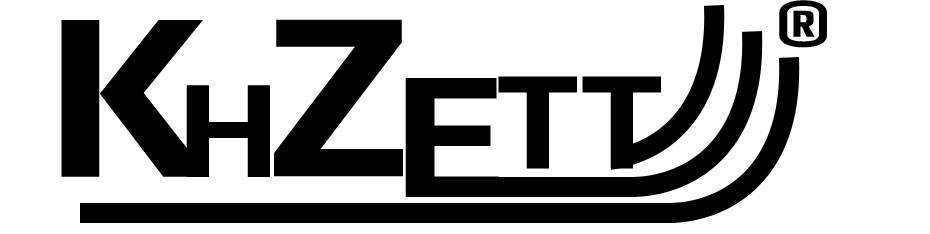
<style>
.page{position:relative;width:930px;height:234px;background:#ffffff}
.page>*{position:absolute;margin:0}
.t1{font:70px "Play-Bold";color:#000000;text-transform:uppercase}
.t2{font:241px "Play-Bold";color:#000000;text-transform:uppercase}
.t3{font:183px "Play-Bold";color:#000000;text-transform:uppercase}
.t4{font:141.4px "Play-Bold";color:#000000;text-transform:uppercase}
.t5{font:141px "Play-Bold";color:#000000;text-transform:uppercase}
</style>
<div class="page">
<p class="t1" style="left:779px;top:0px;width:48px;height:48px">®</p>
<p class="t2" style="left:61px;top:20px;width:149px;height:157px">K</p>
<p class="t2" style="left:274px;top:19px;width:129px;height:158px">z</p>
<p class="t3" style="left:405px;top:78px;width:94px;height:119px">e</p>
<p class="t4" style="left:498px;top:76px;width:163px;height:93px">tt</p>
<p class="t5" style="left:186px;top:85px;width:84px;height:92px">h</p>
</div>
